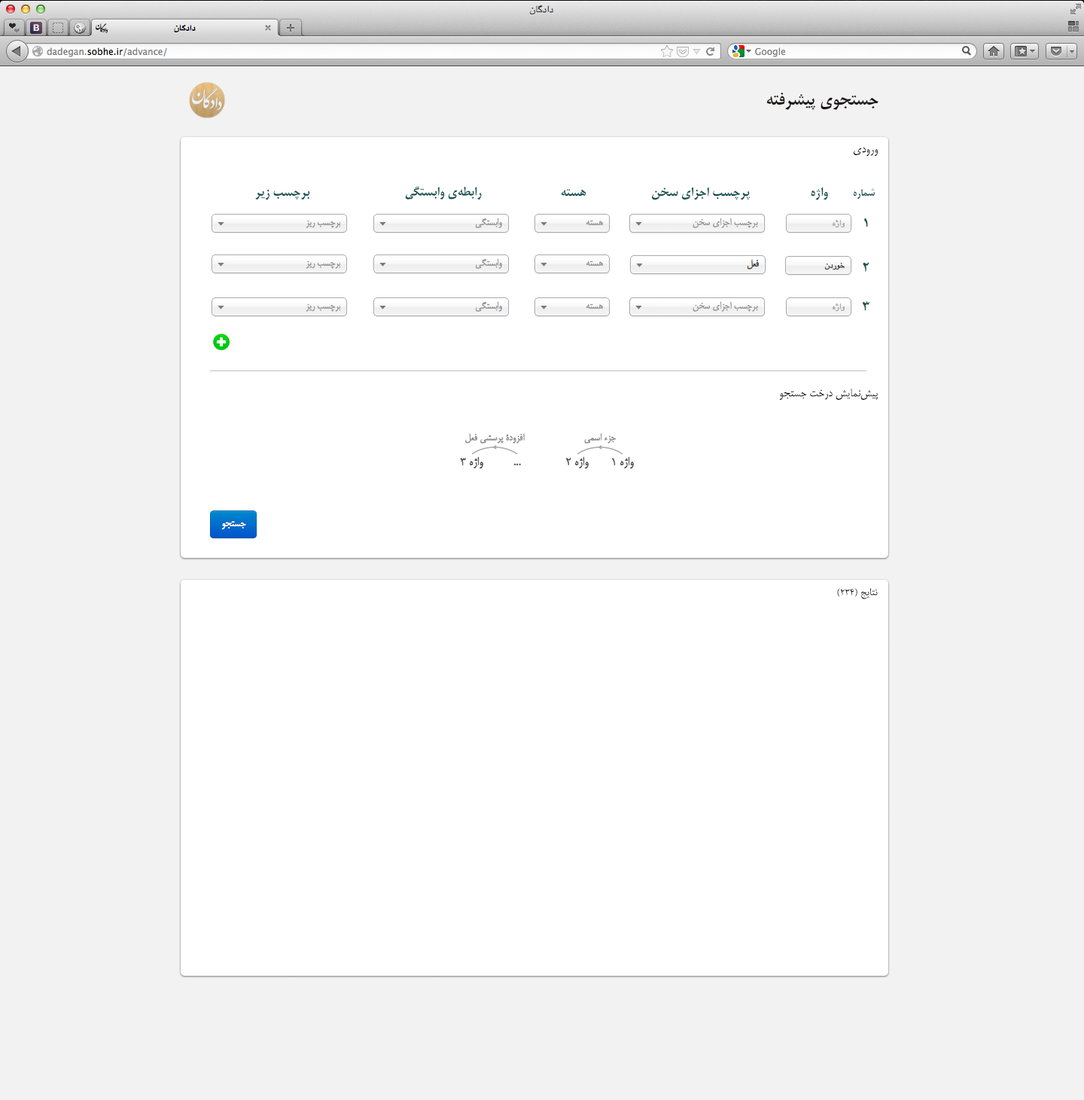
<style>
.page{position:relative;width:1084px;height:1100px;background:#f2f2f2}
.page>*{position:absolute;margin:0}
.t1{font:18.1px "BMitraBold";color:#1c1717}
.t2{font:13.6px "BMitra";color:#000000}
.t3{font:13.6px "BMitraBold";color:#155151}
.t4{font:10.5px "BMitraBold";color:#155151}
.t5{font:13.6px "AdobeArabic-Regular";color:#000000}
</style>
<div class="page">
<p class="t1" style="left:766px;top:92px;width:113px;height:18px">جستجوی پیشرفته</p>
<p class="t2" style="left:854px;top:147px;width:25px;height:9px">ورودی</p>
<p class="t3" style="left:405px;top:186px;width:77px;height:14px">رابطه‌ی وابستگی</p>
<p class="t3" style="left:255px;top:189px;width:55px;height:11px">برچسب زیر</p>
<p class="t3" style="left:561px;top:189px;width:25px;height:7px">هسته</p>
<p class="t3" style="left:652px;top:187px;width:98px;height:13px">پرچسب اجزای سخن</p>
<p class="t3" style="left:811px;top:187px;width:17px;height:13px">واژه</p>
<p class="t4" style="left:853px;top:188px;width:22px;height:11px">شماره</p>
<p class="t3" style="left:864px;top:218px;width:4px;height:9px">۱</p>
<p class="t3" style="left:863px;top:262px;width:7px;height:10px">۲</p>
<p class="t3" style="left:862px;top:301px;width:8px;height:10px">۳</p>
<p class="t2" style="left:779px;top:388px;width:100px;height:12px">پیش‌نمایش درخت جستجو</p>
<p class="t5" style="left:837px;top:588px;width:41px;height:11px">نتایج (۲۳۴)</p>
</div>
